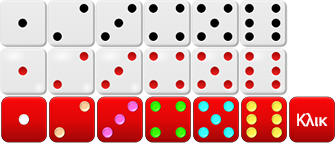
<style>
.page{position:relative;width:336px;height:144px}
.page>*{position:absolute;margin:0}
.t1{font:18px "MyriadPro-Regular";color:#ffffff}
</style>
<div class="page">
<p class="t1" style="left:297px;top:113px;width:31px;height:14px">Κλικ</p>
</div>
